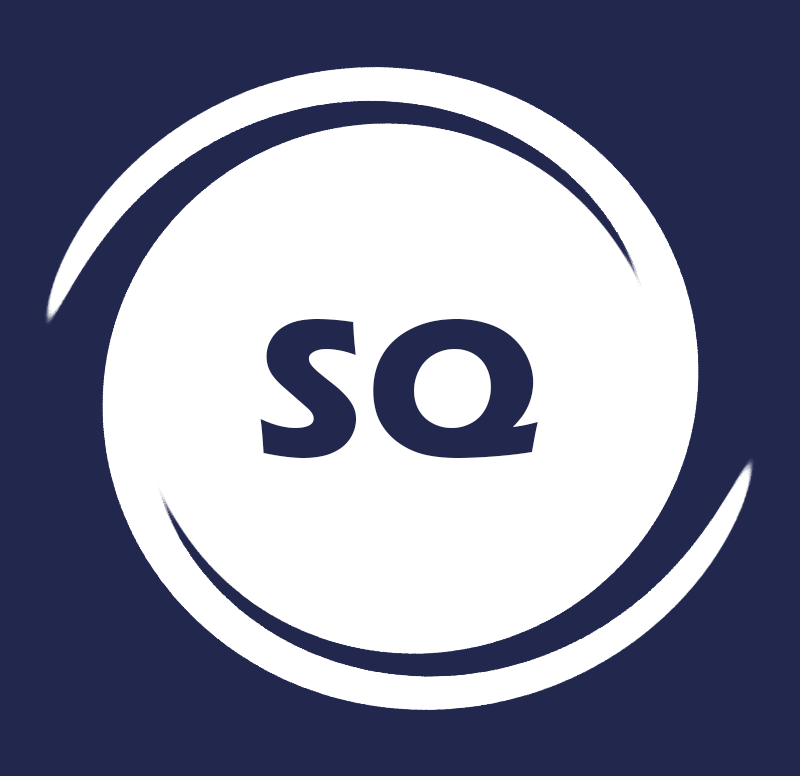
<style>
.page{position:relative;width:800px;height:776px;background:#21274d}
.page>*{position:absolute;margin:0}
.t1{font:200px "ErasITC-Bold";color:#21274d}
</style>
<div class="page">
<p class="t1" style="left:260px;top:319px;width:278px;height:139px">SQ</p>
</div>
